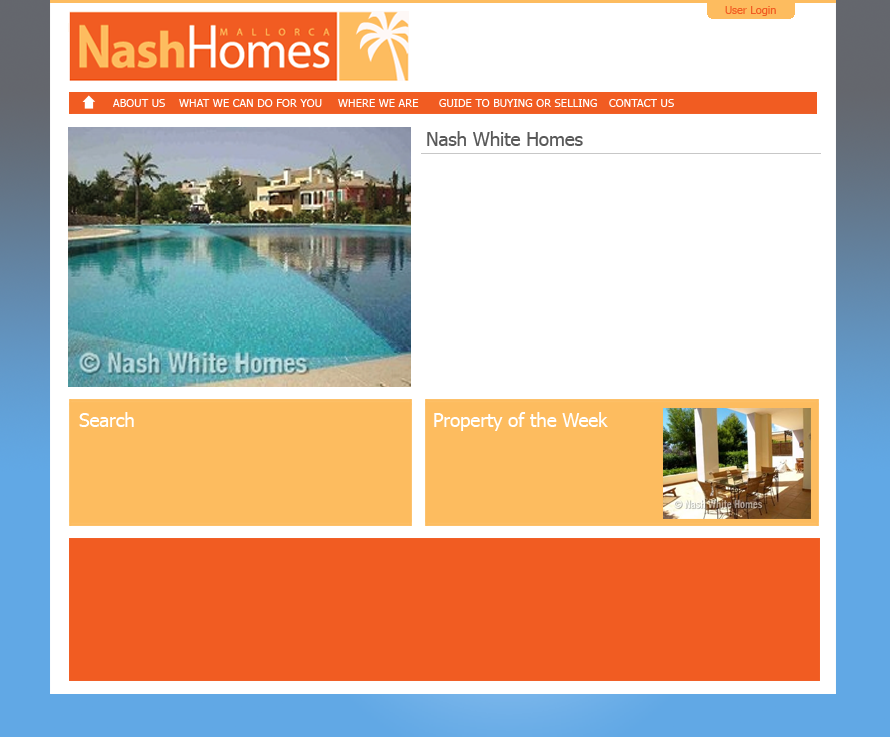
<style>
.page{position:relative;width:890px;height:737px;background:#ffffff}
.page>*{position:absolute;margin:0}
.t1{font:11px "Tahoma";color:#f15c22}
.t2{font:11.2px "Tahoma";color:#ffffff}
.t3{font:18.7px "Tahoma";color:#5a5a5a}
.t4{font:18.7px "Tahoma";color:#ffffff}
</style>
<div class="page">
<p class="t1" style="left:725px;top:6px;width:51px;height:10px">User Login</p>
<p class="t2" style="left:113px;top:99px;width:52px;height:8px">ABOUT US</p>
<p class="t2" style="left:179px;top:99px;width:143px;height:8px">WHAT WE CAN DO FOR YOU</p>
<p class="t2" style="left:338px;top:99px;width:81px;height:8px">WHERE WE ARE</p>
<p class="t2" style="left:439px;top:99px;width:158px;height:8px">GUIDE TO BUYING OR SELLING</p>
<p class="t2" style="left:609px;top:99px;width:65px;height:8px">CONTACT US</p>
<p class="t3" style="left:427px;top:131px;width:156px;height:15px">Nash White Homes</p>
<p class="t4" style="left:79px;top:412px;width:55px;height:15px">Search</p>
<p class="t4" style="left:434px;top:412px;width:174px;height:19px">Property of the Week</p>
</div>
